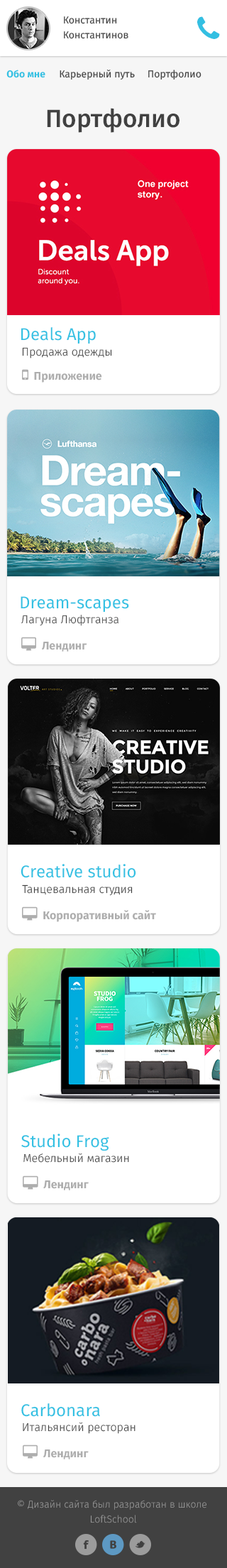
<style>
.page{position:relative;width:227px;height:1568px;background:#ffffff}
.page>*{position:absolute;margin:0}
.t1{font:9.9px/14.9px "FiraSans-Regular";color:#414141}
.t2{font:9.9px "FiraSans-Bold";color:#33c1e3}
.t3{font:9.9px "FiraSans-Regular";color:#414141}
.t4{font:24.8px "FiraSans-Medium";color:#414141}
.t5{font:17px "FiraSans-Regular";color:#33c1e3}
.t6{font:11.4px "FiraSans-Light";color:#414141}
.t7{font:10px/15px "FiraSans-Light";color:#9c9c9c}
</style>
<div class="page">
<p class="t1" style="left:64px;top:16px;width:64px;height:23px">Константин<br>Константинов</p>
<p class="t2" style="left:6px;top:70px;width:39px;height:8px">Обо мне</p>
<p class="t3" style="left:60px;top:70px;width:75px;height:10px">Карьерный путь</p>
<p class="t3" style="left:148px;top:70px;width:54px;height:10px">Портфолио</p>
<p class="t4" style="left:47px;top:108px;width:133px;height:25px">Портфолио</p>
<p class="t5" style="left:21px;top:327px;width:75px;height:17px">Deals App</p>
<p class="t6" style="left:22px;top:347px;width:90px;height:11px">Продажа одежды</p>
<p class="t5" style="left:21px;top:596px;width:108px;height:16px">Dream-scapes</p>
<p class="t6" style="left:21px;top:615px;width:98px;height:11px">Лагуна Люфтганза</p>
<p class="t5" style="left:21px;top:864px;width:115px;height:14px">Creative studio</p>
<p class="t6" style="left:22px;top:884px;width:111px;height:12px">Танцевальная студия</p>
<p class="t5" style="left:21px;top:1134px;width:88px;height:17px">Studio Frog</p>
<p class="t6" style="left:23px;top:1153px;width:106px;height:10px">Мебельный магазин</p>
<p class="t5" style="left:21px;top:1403px;width:79px;height:14px">Carbonara</p>
<p class="t6" style="left:23px;top:1422px;width:113px;height:12px">Итальянсий ресторан</p>
<p class="t7" style="left:18px;top:1500px;width:189px;height:23px;text-align:center">© Дизайн сайта был разработан в школе <br>LoftSchool</p>
</div>
